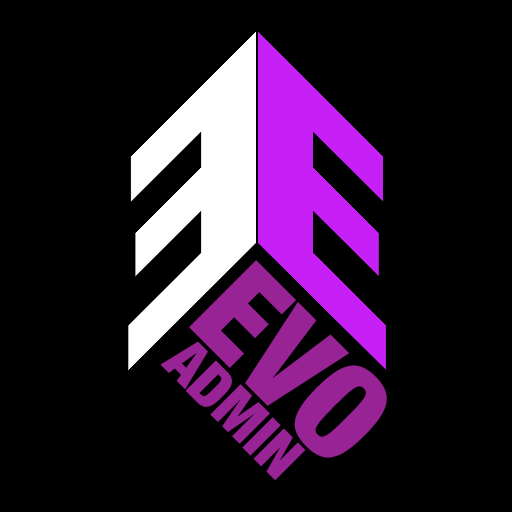
<style>
.page{position:relative;width:512px;height:512px;background:#000000}
.page>*{position:absolute;margin:0}
.t1{font:132.9px "HelveticaNeue-CondensedBlack";color:#982395}
.t2{font:60px "HelveticaNeue-CondensedBlack";color:#982395}
</style>
<div class="page">
<p class="t1" style="left:189px;top:260px;width:198px;height:198px;rotate:45deg">EVO</p>
<p class="t2" style="left:160px;top:341px;width:146px;height:140px;rotate:45deg">ADMIN</p>
</div>
